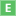
<style>
.page{position:relative;width:16px;height:16px;background:#5ac063}
.page>*{position:absolute;margin:0}
.t1{font:12px "MyriadPro-Bold";color:#ffffff}
</style>
<div class="page">
<p class="t1" style="left:5px;top:3px;width:6px;height:9px">E</p>
</div>
